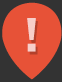
<style>
.page{position:relative;width:62px;height:82px;background:#e75237}
.page>*{position:absolute;margin:0}
.t1{font:48px "Gotham-Bold";color:#f7cfca}
</style>
<div class="page">
<p class="t1" style="left:27px;top:18px;width:9px;height:34px">!</p>
</div>
